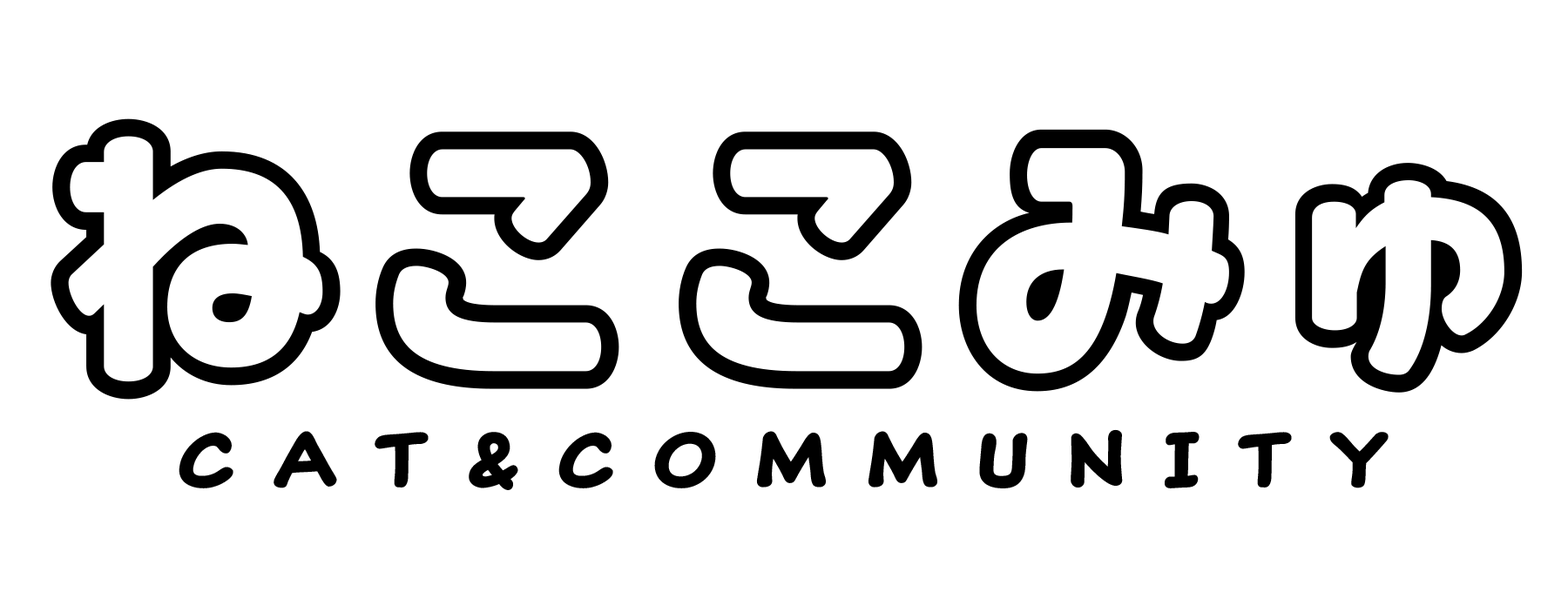
<style>
.page{position:relative;width:1568px;height:612px;background:#ffffff}
.page>*{position:absolute;margin:0}
.t1{font:302.9px "VDL-MegaMaru-pop-FutoLine";color:#000000}
.t2{font:77.6px "ClassicComic-Bold";letter-spacing:0.5em;color:#000000}
</style>
<div class="page">
<p class="t1" style="left:51px;top:118px;width:1472px;height:282px">ねここみゅ</p>
<p class="t2" style="left:179px;top:429px;width:1210px;height:61px">CAT&amp;COMMUNITY</p>
</div>
